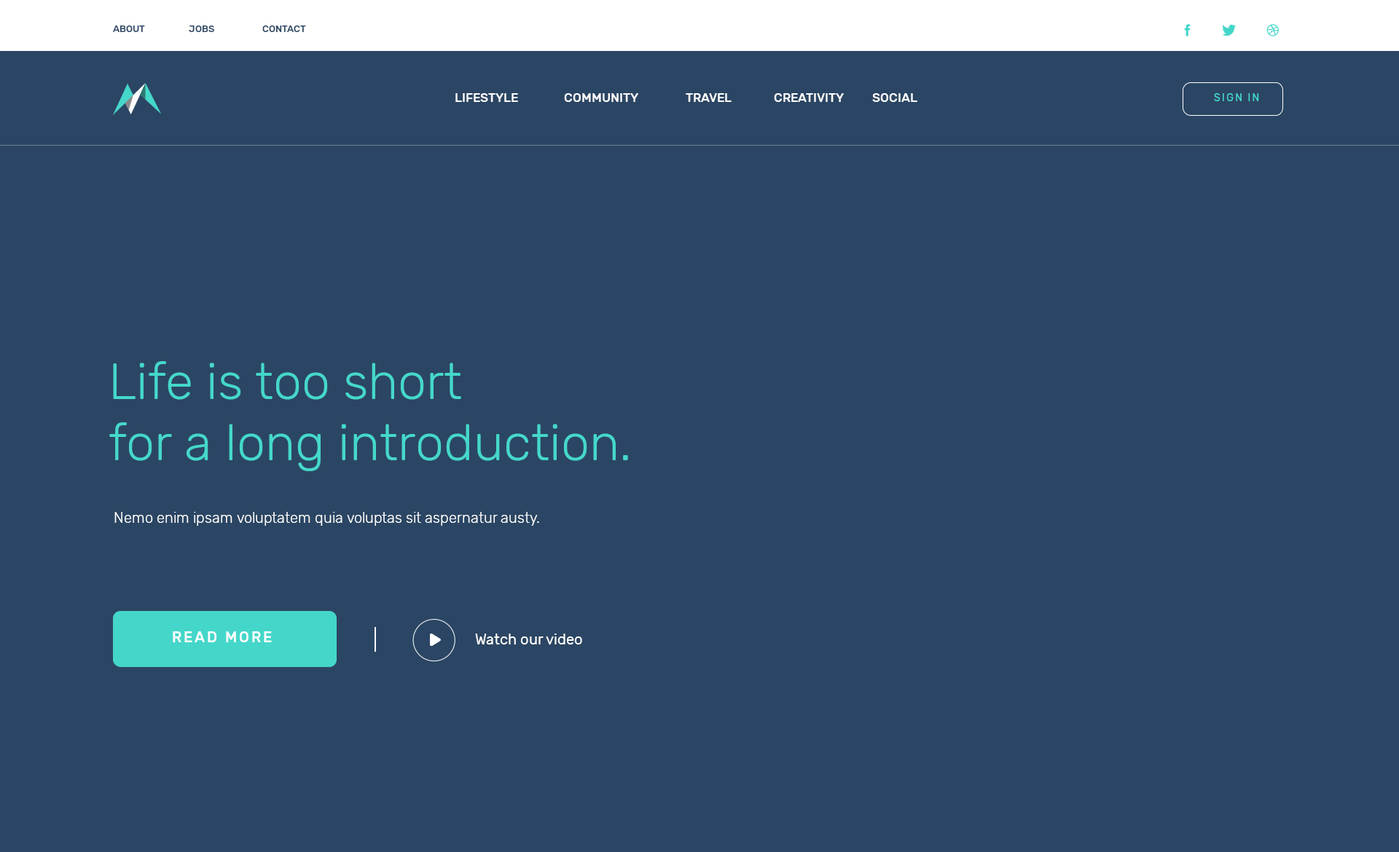
<style>
.page{position:relative;width:1399px;height:852px;background:#2b4664}
.page>*{position:absolute;margin:0}
.t1{font:9.5px "Rubik-Medium";color:#2c4765}
.t2{font:12.4px "Rubik-Medium";color:#ffffff}
.t3{font:10.2px "Rubik-Regular";letter-spacing:0.15em;color:#45d8ca}
.t4{font:51px "Rubik-Light";color:#45d8ca}
.t5{font:14.6px "Rubik-Light";color:#ffffff}
.t6{font:14.6px "Rubik-Medium";letter-spacing:0.15em;color:#ffffff}
.t7{font:14.6px "Rubik-Regular";color:#ffffff}
</style>
<div class="page">
<p class="t1" style="left:113px;top:26px;width:32px;height:6px">ABOUT</p>
<p class="t1" style="left:189px;top:26px;width:25px;height:6px">JOBS</p>
<p class="t1" style="left:262px;top:26px;width:44px;height:6px">CONTACT</p>
<p class="t2" style="left:455px;top:93px;width:63px;height:9px">LIFESTYLE</p>
<p class="t2" style="left:564px;top:93px;width:74px;height:9px">COMMUNITY</p>
<p class="t2" style="left:686px;top:93px;width:45px;height:9px">TRAVEL</p>
<p class="t2" style="left:774px;top:93px;width:70px;height:9px">CREATIVITY</p>
<p class="t2" style="left:872px;top:93px;width:45px;height:9px">SOCIAL</p>
<p class="t3" style="left:1214px;top:93px;width:45px;height:8px">SIGN IN</p>
<p class="t4" style="left:109px;top:361px;width:519px;height:110px">Life is too short <br>for a long introduction.</p>
<p class="t5" style="left:114px;top:512px;width:425px;height:14px">Nemo enim ipsam voluptatem quia voluptas sit aspernatur austy.</p>
<p class="t6" style="left:173px;top:632px;width:99px;height:11px">READ MORE</p>
<p class="t7" style="left:475px;top:634px;width:107px;height:11px">Watch our video</p>
</div>
